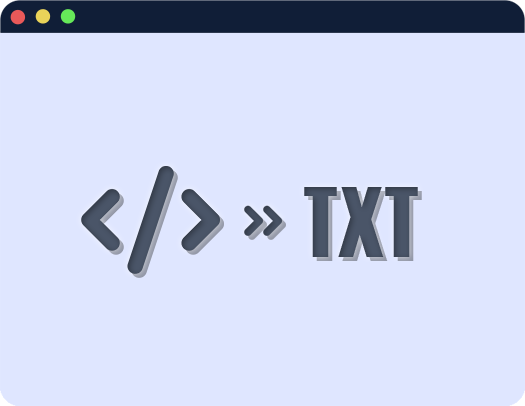
<style>
.page{position:relative;width:525px;height:406px;background:#dfe6ff}
.page>*{position:absolute;margin:0}
.t1{font:100px "Haettenschweiler";color:#4a5568}
</style>
<div class="page">
<p class="t1" style="left:304px;top:187px;width:114px;height:70px">TXT</p>
</div>
